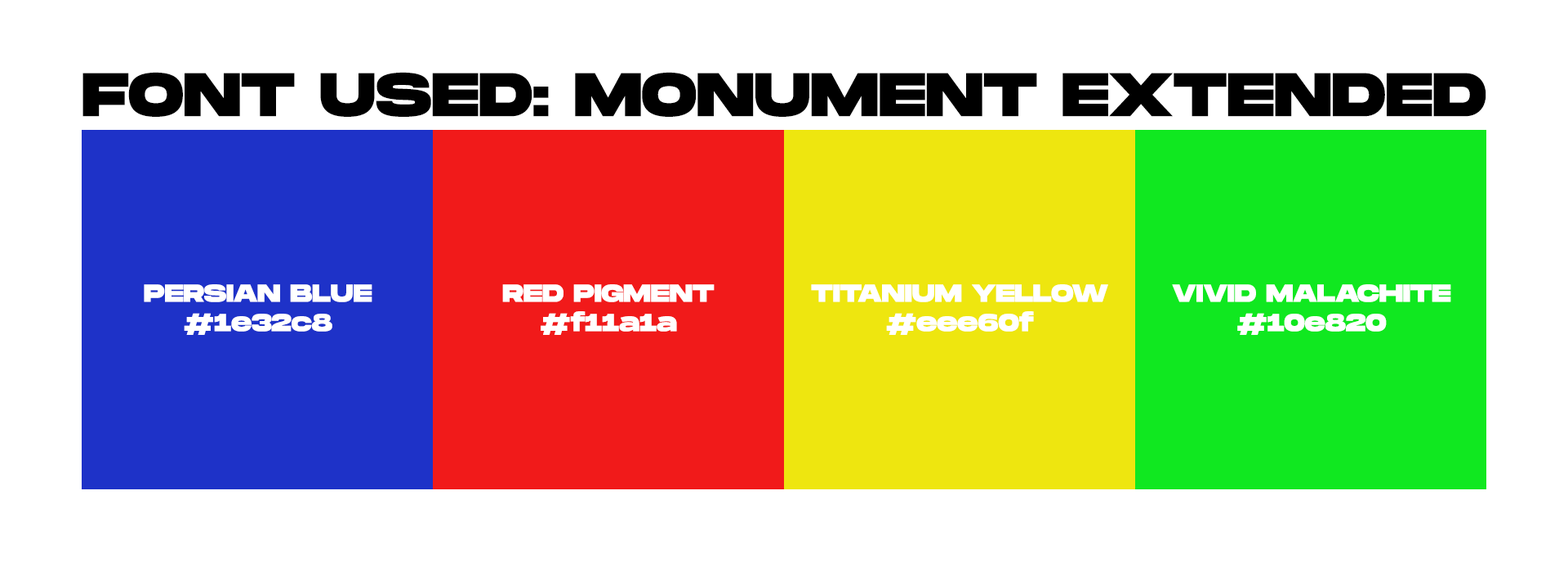
<style>
.page{position:relative;width:1568px;height:571px;background:#ffffff}
.page>*{position:absolute;margin:0}
.t1{font:61.2px "MonumentExtended-Ultrabold";color:#000000}
.t2{font:24.5px "MonumentExtended-Ultrabold";color:#ffffff}
</style>
<div class="page">
<p class="t1" style="left:82px;top:72px;width:1404px;height:45px">FONT USED: MONUMENT EXTENDED</p>
<p class="t2" style="left:144px;top:284px;width:228px;height:51px;text-align:center">PERSIAN BLUE<br>#1e32c8</p>
<p class="t2" style="left:502px;top:284px;width:213px;height:51px;text-align:center">RED PIGMENT<br>#f11a1a</p>
<p class="t2" style="left:811px;top:284px;width:297px;height:51px;text-align:center">TITANIUM YELLOW<br>#eee60f</p>
<p class="t2" style="left:1172px;top:284px;width:279px;height:51px;text-align:center">VIVID MALACHITE<br>#10e820</p>
</div>
